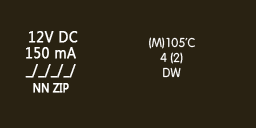
<style>
.page{position:relative;width:256px;height:128px;background:#292212}
.page>*{position:absolute;margin:0}
.t1{font:15.7px/16.7px "SegoeUI";letter-spacing:0.02em;color:#ffffff;font-weight:bold;scale:0.89 1}
.t2{font:11.8px/16.7px "SegoeUI";letter-spacing:0.02em;color:#ffffff;font-weight:bold;scale:0.89 1}
.t3{font:12.5px "Vagabond";color:#ffffff}
</style>
<div class="page">
<p class="t1" style="left:25px;top:31px;width:53px;height:62px;text-align:center">12V DC<br>150 mA<br>_/_/_/_/<br><span class="t2">NN ZIP</span></p>
<p class="t3" style="left:149px;top:37px;width:46px;height:41px;text-align:center">(M)105’C<br>4 (2)<br>DW</p>
</div>
